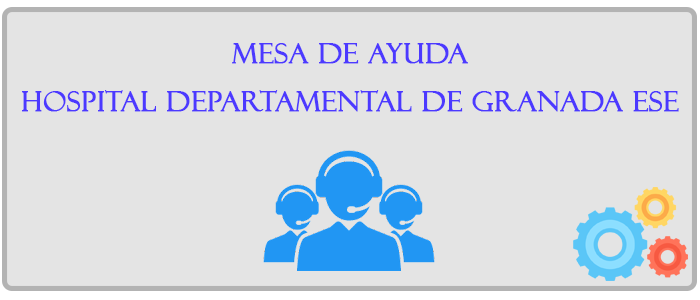
<style>
.page{position:relative;width:700px;height:300px;background:#e4e4e4}
.page>*{position:absolute;margin:0}
.t1{font:28px/48px "FelixTitlingMT";letter-spacing:0.008em;color:#4c39ff;font-weight:bold}
</style>
<div class="page">
<p class="t1" style="left:22px;top:43px;width:657px;height:69px;text-align:center">MESA DE AYUDA<br>HOSPITAL DEPARTAMENTAL DE GRANADA ESE</p>
</div>
